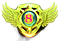
<style>
.page{position:relative;width:60px;height:41px;background:#ffffff}
.page>*{position:absolute;margin:0}
.t1{font:11px "PalatinoLinotype-Roman";letter-spacing:-0.04em;color:#ff0084;font-weight:bold;scale:1.38 1}
</style>
<div class="page">
<p class="t1" style="left:25px;top:14px;width:8px;height:9px">8</p>
</div>
